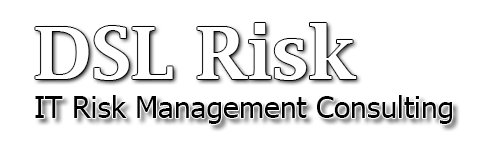
<style>
.page{position:relative;width:500px;height:150px;background:#ffffff}
.page>*{position:absolute;margin:0}
.t1{font:30px "Tahoma";color:#000000}
</style>
<div class="page">
<p class="t1" style="left:35px;top:95px;width:417px;height:29px">IT Risk Management Consulting</p>
</div>
